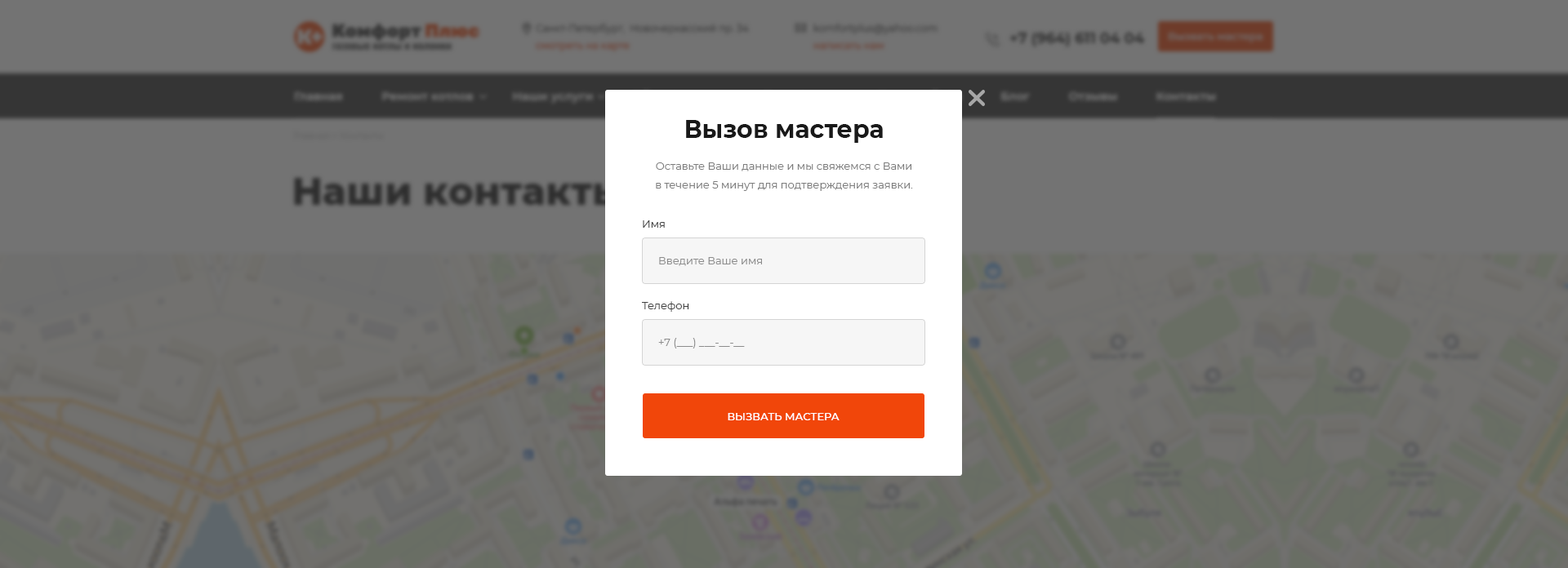
<style>
.page{position:relative;width:1568px;height:568px;background:#737373}
.page>*{position:absolute;margin:0}
.t1{font:24.5px "Montserrat-Bold";color:#191919}
.t2{font:10.6px/18.8px "Montserrat-Regular";color:#7d7d7d}
.t3{font:10.6px "Montserrat-Regular";color:#414141}
.t4{font:10.6px "Montserrat-Regular";color:#8c8c8c}
.t5{font:10.6px "Montserrat-Medium";color:#ffffff}
</style>
<div class="page">
<p class="t1" style="left:686px;top:120px;width:197px;height:23px">Вызов мастера</p>
<p class="t2" style="left:656px;top:163px;width:257px;height:28px;text-align:center">Оставьте Ваши данные и мы свяжемся с Вами<br>в течение 5 минут для подтверждения заявки.</p>
<p class="t3" style="left:643px;top:220px;width:22px;height:8px">Имя</p>
<p class="t4" style="left:659px;top:257px;width:103px;height:9px">Введите Ваше имя</p>
<p class="t3" style="left:642px;top:301px;width:47px;height:11px">Телефон</p>
<p class="t4" style="left:658px;top:338px;width:87px;height:11px">+7 (___) ___-__-__</p>
<p class="t5" style="left:728px;top:413px;width:112px;height:8px">ВЫЗВАТЬ МАСТЕРА</p>
</div>
